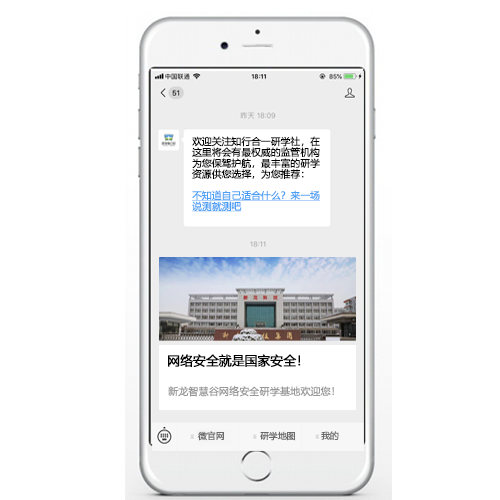
<style>
.page{position:relative;width:500px;height:500px;background:#ffffff}
.page>*{position:absolute;margin:0}
.t1{font:9.7px/10.8px "MicrosoftYaHei";letter-spacing:-0.01em;color:#040404;font-weight:bold}
.t2{font:9.7px/10.8px "MicrosoftYaHei";letter-spacing:-0.01em;color:#4a9ff5;font-weight:bold;text-decoration:underline}
.t3{font:12.7px "MicrosoftYaHei";letter-spacing:-0.01em;color:#000000;font-weight:bold}
.t4{font:10px "MicrosoftYaHei";letter-spacing:-0.01em;color:#989898;font-weight:bold}
.t5{font:8.7px "MicrosoftYaHei";letter-spacing:-0.01em;color:#6b6b6b;font-weight:bold}
</style>
<div class="page">
<p class="t1" style="left:192px;top:136px;width:128px;height:76px">欢迎关注知行合一研学社，在这里将会有最权威的监管机构为您保驾护航，最丰富的研学资源供您选择，为您推荐：<br><br><span class="t2">不知道自己适合什么？来一场说测就测吧</span></p>
<p class="t3" style="left:168px;top:354px;width:133px;height:14px">网络安全就是国家安全！</p>
<p class="t4" style="left:168px;top:386px;width:166px;height:11px">新龙智慧谷网络安全研学基地欢迎您！</p>
<p class="t5" style="left:198px;top:431px;width:26px;height:10px">微官网</p>
<p class="t5" style="left:260px;top:431px;width:35px;height:10px">研学地图</p>
<p class="t5" style="left:321px;top:431px;width:18px;height:9px">我的</p>
</div>
